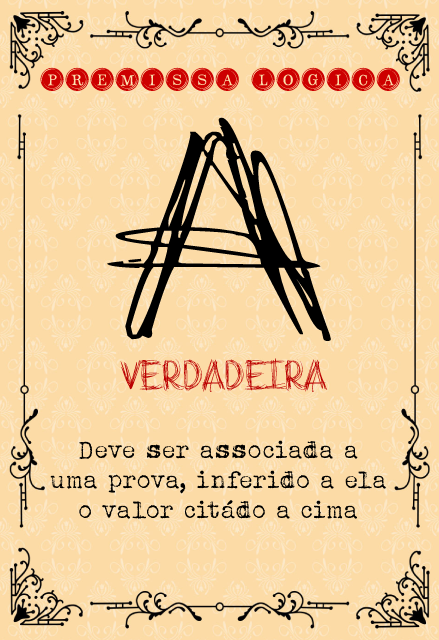
<style>
.page{position:relative;width:439px;height:640px;background:#fcdba6}
.page>*{position:absolute;margin:0}
.t1{font:30.9px "TypeKeysFilled";color:#cd0000}
.t2{font:220.7px "Goaroundthebooks2022";color:#000000;scale:1.46 1}
.t3{font:30.9px "Goaroundthebooks2022";color:#bb0000}
.t4{font:25px "AlbertsthalTypewriter";color:#000000}
</style>
<div class="page">
<p class="t1" style="left:40px;top:67px;width:360px;height:24px">Premissa logica</p>
<p class="t2" style="left:107px;top:117px;width:224px;height:224px">A</p>
<p class="t3" style="left:120px;top:358px;width:208px;height:36px">Verdadeira</p>
<p class="t4" style="left:50px;top:440px;width:336px;height:79px;text-align:center">Deve ser associada a<br>uma prova, inferido a ela<br>o valor citádo a cima</p>
</div>
